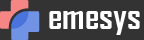
<style>
.page{position:relative;width:144px;height:40px;background:#333333}
.page>*{position:absolute;margin:0}
.t1{font:36px "AgencyFB-Bold";color:#ffffff}
</style>
<div class="page">
<p class="t1" style="left:49px;top:11px;width:91px;height:24px">emesys</p>
</div>
